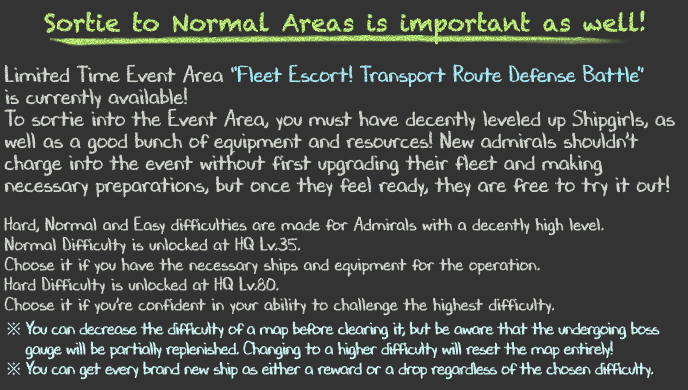
<style>
.page{position:relative;width:688px;height:390px;background:#333333}
.page>*{position:absolute;margin:0}
.t1{font:24px "Chalkduster"}
.t2{font:22px/22px "DJBChalkItUp";color:#d9ded6}
.t3{font:22px/22px "DJBChalkItUp";color:#adf2ff}
.t4{font:18px/20px "DJBChalkItUp";color:#d9ded6}
.t5{font:18px/24px "DJBChalkItUp";color:#d9ded6}
.t6{font:18px/20px "TimesNewRomanPSMT";letter-spacing:-0.04em;color:#d7feff}
.t7{font:18px/20px "DJBChalkItUp";letter-spacing:-0.04em;color:#d7feff}
</style>
<div class="page">
<p class="t1" style="left:44px;top:10px;width:601px;height:35px">Sortie to Normal Areas is important as well!</p>
<p class="t2" style="left:4px;top:64px;width:671px;height:316px">Limited Time Event Area <span class="t3">“Fleet Escort! Transport Route Defense Battle”<br></span>is currently available!<br>To sortie into the Event Area, you must have decently leveled up Shipgirls, as<br>well as a good bunch of equipment and resources! New admirals shouldn’t<br>charge into the event without first upgrading their fleet and making<br>necessary preparations, but once they feel ready, they are free to try it out!<br><br><span class="t4">Hard, Normal and Easy difficulties are made for Admirals with a decently high level.<br>Normal Difficulty is unlocked at HQ Lv.35.<br>Choose it if you have the necessary ships and equipment for the operation.<br>Hard Difficulty is unlocked at HQ Lv.80.<br></span><span class="t5">Choose it if you’re confident in your ability to challenge the highest difficulty.<br></span><span class="t6">※ </span><span class="t7">You can decrease the difficulty of a map before clearing it, but be aware that the undergoing boss<br>　 gauge will be partially replenished. Changing to a higher difficulty will reset the map entirely!<br></span><span class="t6">※ </span><span class="t7">You can get every brand new ship as either a reward or a drop regardless of the chosen difficulty.</span></p>
</div>
